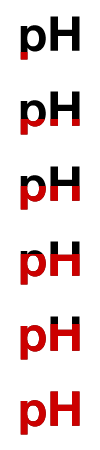
<style>
.page{position:relative;width:100px;height:450px;background:#ffffff}
.page>*{position:absolute;margin:0}
.t1{font:48px "HelveticaNeueLTStd-Bd";color:#000000}
.t2{font:48px "HelveticaNeueLTStd-Bd"}
.t3{font:48px "HelveticaNeueLTStd-Bd";color:#cc0000}
</style>
<div class="page">
<p class="t1" style="left:20px;top:16px;width:60px;height:44px">pH</p>
<p class="t1" style="left:20px;top:16px;width:60px;height:44px">pH</p>
<p class="t1" style="left:20px;top:91px;width:60px;height:44px">pH</p>
<p class="t1" style="left:20px;top:91px;width:60px;height:44px">pH</p>
<p class="t2" style="left:20px;top:166px;width:60px;height:44px">pH</p>
<p class="t2" style="left:20px;top:166px;width:60px;height:44px">pH</p>
<p class="t3" style="left:20px;top:241px;width:60px;height:44px">pH</p>
<p class="t3" style="left:20px;top:241px;width:60px;height:44px">pH</p>
<p class="t3" style="left:20px;top:316px;width:60px;height:44px">pH</p>
<p class="t3" style="left:20px;top:316px;width:60px;height:44px">pH</p>
<p class="t3" style="left:20px;top:391px;width:60px;height:44px">pH</p>
<p class="t3" style="left:20px;top:391px;width:60px;height:44px">pH</p>
</div>
